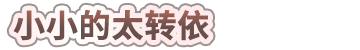
<style>
.page{position:relative;width:360px;height:50px;background:#ffffff}
.page>*{position:absolute;margin:0}
.t1{font:32px "SourceHanSansSC-Bold";font-weight:bold}
</style>
<div class="page">
<p class="t1" style="left:13px;top:9px;width:196px;height:32px">小小的太转依</p>
</div>
